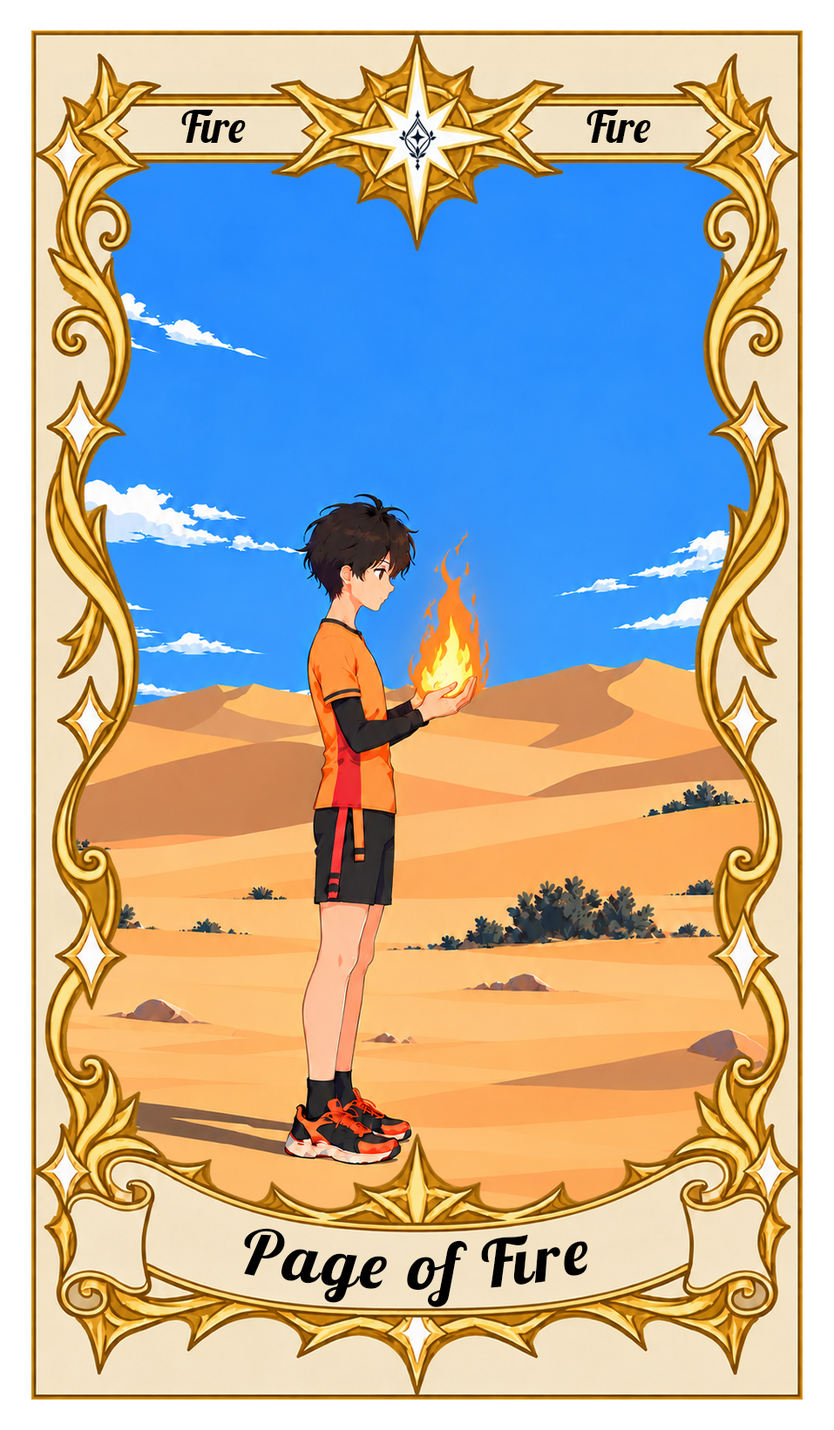
<style>
.page{position:relative;width:834px;height:1430px}
.page>*{position:absolute;margin:0}
.t1{font:43.6px "Lobster-Regular";color:#000000}
.t2{font:65.3px "Lobster-Regular";letter-spacing:0.05em;color:#000000}
</style>
<div class="page">
<p class="t1" style="left:181px;top:110px;width:65px;height:33px">Fire</p>
<p class="t1" style="left:586px;top:110px;width:65px;height:33px">Fire</p>
<p class="t2" style="left:244px;top:1228px;width:344px;height:80px">Page of Fire</p>
</div>
